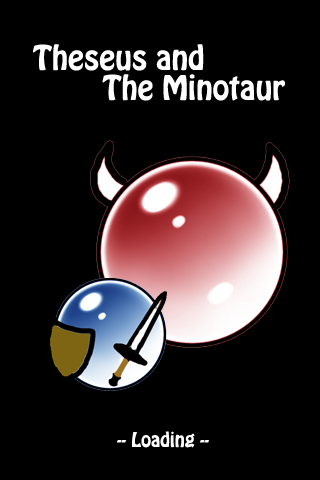
<style>
.page{position:relative;width:320px;height:480px;background:#000000}
.page>*{position:absolute;margin:0}
.t1{font:30px/30px "HoboStd";color:#ffffff}
.t2{font:18px "HoboStd";color:#ffffff}
</style>
<div class="page">
<p class="t1" style="left:33px;top:44px;width:252px;height:57px">Theseus and<br>        The Minotaur</p>
<p class="t2" style="left:117px;top:431px;width:92px;height:17px">-- Loading --</p>
</div>
